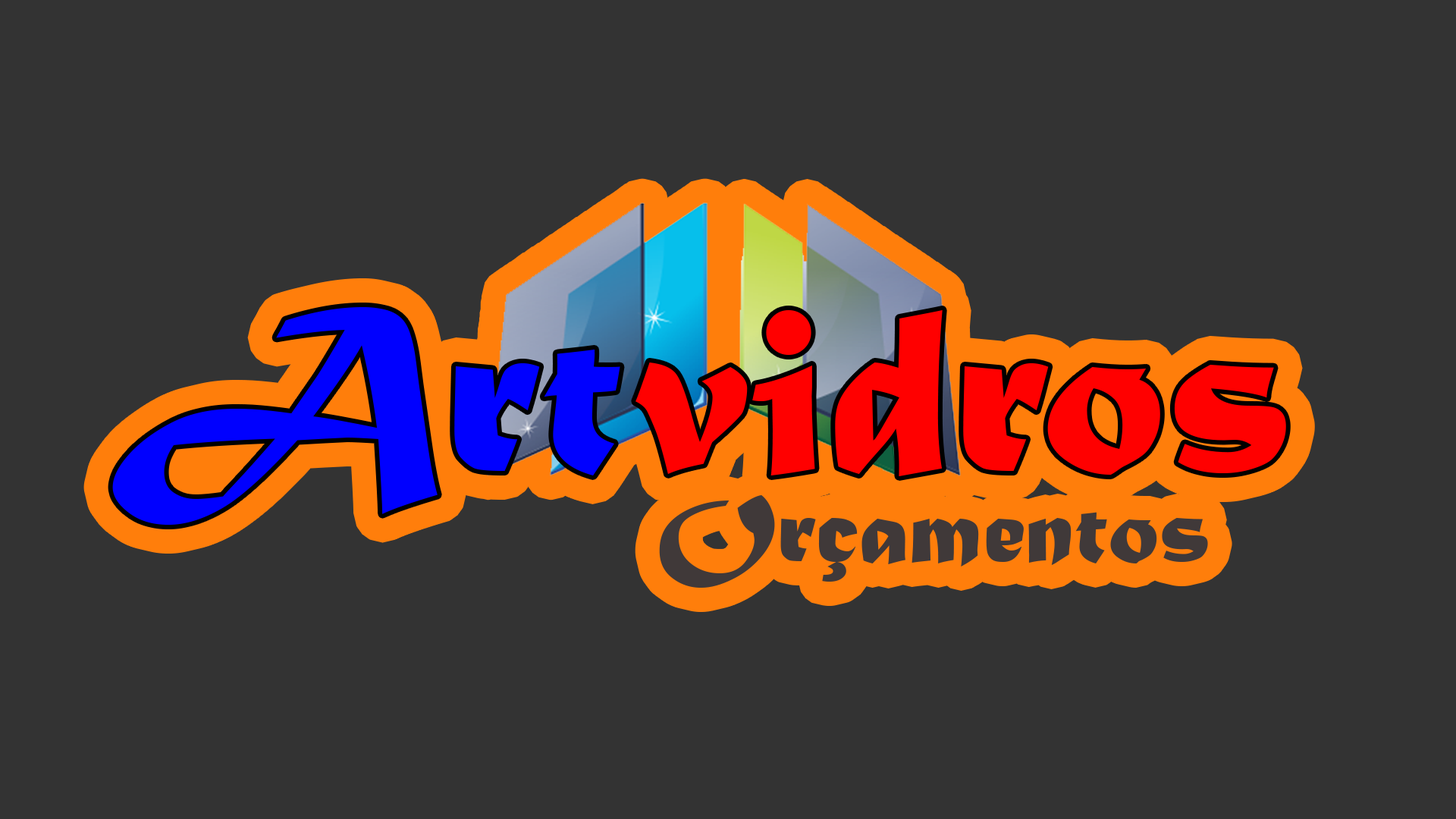
<style>
.page{position:relative;width:1456px;height:819px;background:#333333}
.page>*{position:absolute;margin:0}
.t1{font:250.2px "MaturaMTScriptCapitals";color:#0000ff}
.t2{font:250.2px "MaturaMTScriptCapitals";color:#ff0000}
.t3{font:102px "MaturaMTScriptCapitals";color:#403939}
</style>
<div class="page">
<p class="t1" style="left:112px;top:306px;width:508px;height:219px">Art</p>
<p class="t2" style="left:635px;top:309px;width:651px;height:167px">vidros</p>
<p class="t3" style="left:659px;top:495px;width:549px;height:93px">Orçamentos</p>
</div>
